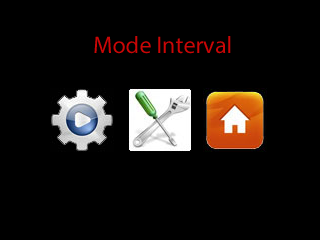
<style>
.page{position:relative;width:320px;height:240px;background:#000000}
.page>*{position:absolute;margin:0}
.t1{font:24px "MyriadPro-Regular";color:#ca0606}
</style>
<div class="page">
<p class="t1" style="left:94px;top:36px;width:137px;height:18px">Mode Interval</p>
</div>
